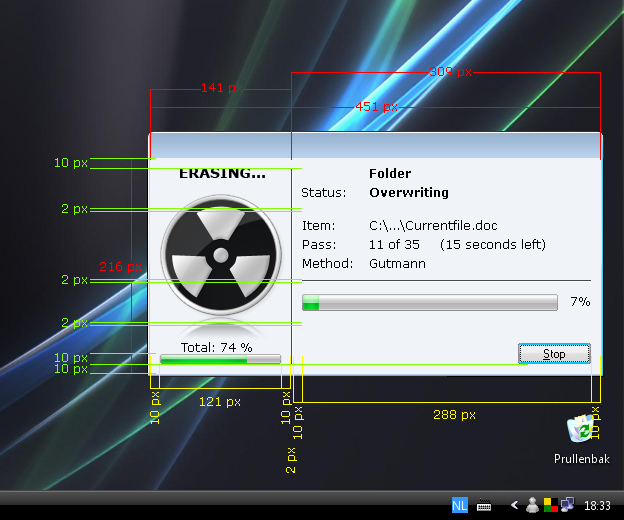
<style>
.page{position:relative;width:624px;height:520px;background:#f0f4f9}
.page>*{position:absolute;margin:0}
.t1{font:12px "Verdana";color:#ff0000}
.t2{font:12px "Verdana";color:#84ff00}
.t3{font:14px "Verdana-Bold";color:#000000}
.t4{font:12px "Verdana-Bold";color:#000000}
.t5{font:12px "Verdana";color:#000000}
.t6{font:12px "Verdana";color:#fffc00}
</style>
<div class="page">
<p class="t1" style="left:430px;top:67px;width:41px;height:11px">309 px</p>
<p class="t1" style="left:202px;top:83px;width:40px;height:11px">141 px</p>
<p class="t1" style="left:356px;top:102px;width:41px;height:11px">451 px</p>
<p class="t2" style="left:55px;top:158px;width:32px;height:11px">10 px</p>
<p class="t3" style="left:180px;top:168px;width:85px;height:10px">ERASING...</p>
<p class="t4" style="left:370px;top:168px;width:41px;height:10px">Folder</p>
<p class="t5" style="left:302px;top:188px;width:43px;height:9px">Status:</p>
<p class="t4" style="left:370px;top:187px;width:78px;height:12px">Overwriting</p>
<p class="t2" style="left:62px;top:204px;width:25px;height:11px">2 px</p>
<p class="t5" style="left:303px;top:221px;width:31px;height:9px">Item:</p>
<p class="t5" style="left:370px;top:220px;width:127px;height:12px">C:\...\Currentfile.doc</p>
<p class="t5" style="left:303px;top:240px;width:32px;height:9px">Pass:</p>
<p class="t5" style="left:370px;top:239px;width:175px;height:12px">11 of 35     (15 seconds left)</p>
<p class="t1" style="left:100px;top:262px;width:41px;height:11px">216 px</p>
<p class="t5" style="left:303px;top:258px;width:49px;height:10px">Method:</p>
<p class="t5" style="left:370px;top:259px;width:55px;height:9px">Gutmann</p>
<p class="t2" style="left:62px;top:275px;width:25px;height:11px">2 px</p>
<p class="t5" style="left:571px;top:297px;width:19px;height:9px">7%</p>
<p class="t2" style="left:62px;top:318px;width:25px;height:11px">2 px</p>
<p class="t5" style="left:181px;top:342px;width:71px;height:10px">Total: 74 %</p>
<p class="t2" style="left:55px;top:353px;width:32px;height:11px">10 px</p>
<p class="t2" style="left:55px;top:364px;width:32px;height:11px">10 px</p>
<p class="t6" style="left:150px;top:392px;width:11px;height:32px;rotate:-90deg">10 px</p>
<p class="t6" style="left:200px;top:397px;width:40px;height:11px">121 px</p>
<p class="t6" style="left:281px;top:392px;width:11px;height:32px;rotate:-90deg">10 px</p>
<p class="t6" style="left:293px;top:407px;width:11px;height:32px;rotate:-90deg">10 px</p>
<p class="t6" style="left:434px;top:410px;width:41px;height:11px">288 px</p>
<p class="t6" style="left:590px;top:407px;width:11px;height:32px;rotate:-90deg">10 px</p>
<p class="t6" style="left:286px;top:448px;width:11px;height:25px;rotate:-90deg">2 px</p>
</div>
